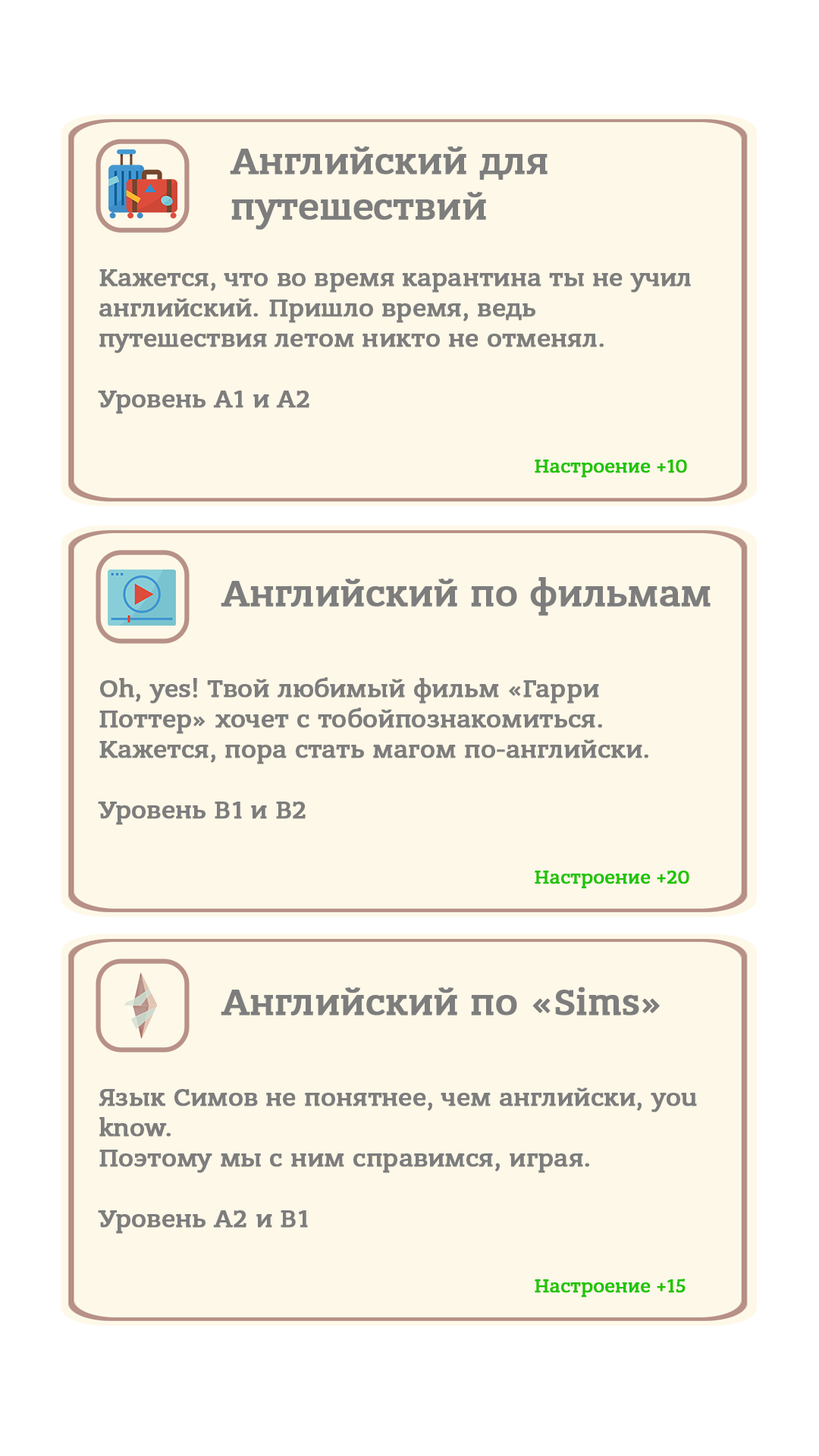
<style>
.page{position:relative;width:819px;height:1456px;background:#fef8e8}
.page>*{position:absolute;margin:0}
.t1{font:38px "BanderaProMedium";color:#7d7d7d;font-weight:bold}
.t2{font:25.3px "BanderaProMedium";color:#7d7d7d;font-weight:bold}
.t3{font:19px "BanderaProMedium";color:#20c400;font-weight:bold}
.t4{font:37.9px "BanderaProMedium";color:#7d7d7d;font-weight:bold}
</style>
<div class="page">
<p class="t1" style="left:230px;top:146px;width:318px;height:84px">Английский для путешествий</p>
<p class="t2" style="left:98px;top:269px;width:593px;height:145px">Кажется, что во время карантина ты не учил английский. Пришло время, ведь путешествия летом никто не отменял.<br><br>Уровень А1 и А2</p>
<p class="t3" style="left:535px;top:460px;width:152px;height:18px">Настроение +10</p>
<p class="t4" style="left:221px;top:577px;width:490px;height:39px">Английский по фильмам</p>
<p class="t2" style="left:98px;top:677px;width:550px;height:148px">Oh, yes! Твой любимый фильм «Гарри Поттер» хочет с тобойпознакомиться.<br>Кажется, пора стать магом по-английски.<br><br>Уровень В1 и В2</p>
<p class="t3" style="left:535px;top:871px;width:154px;height:18px">Настроение +20</p>
<p class="t4" style="left:221px;top:987px;width:439px;height:28px">Английский по «Sims»</p>
<p class="t2" style="left:98px;top:1087px;width:599px;height:147px">Язык Симов не понятнее, чем английски, you know.<br>Поэтому мы с ним справимся, играя.<br><br>Уровень А2 и В1</p>
<p class="t3" style="left:535px;top:1279px;width:151px;height:18px">Настроение +15</p>
</div>
